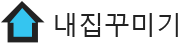
<style>
.page{position:relative;width:180px;height:44px;background:#ffffff}
.page>*{position:absolute;margin:0}
.t1{font:26px "MalgunGothic";color:#222222}
</style>
<div class="page">
<p class="t1" style="left:55px;top:13px;width:123px;height:24px">내집꾸미기</p>
</div>
